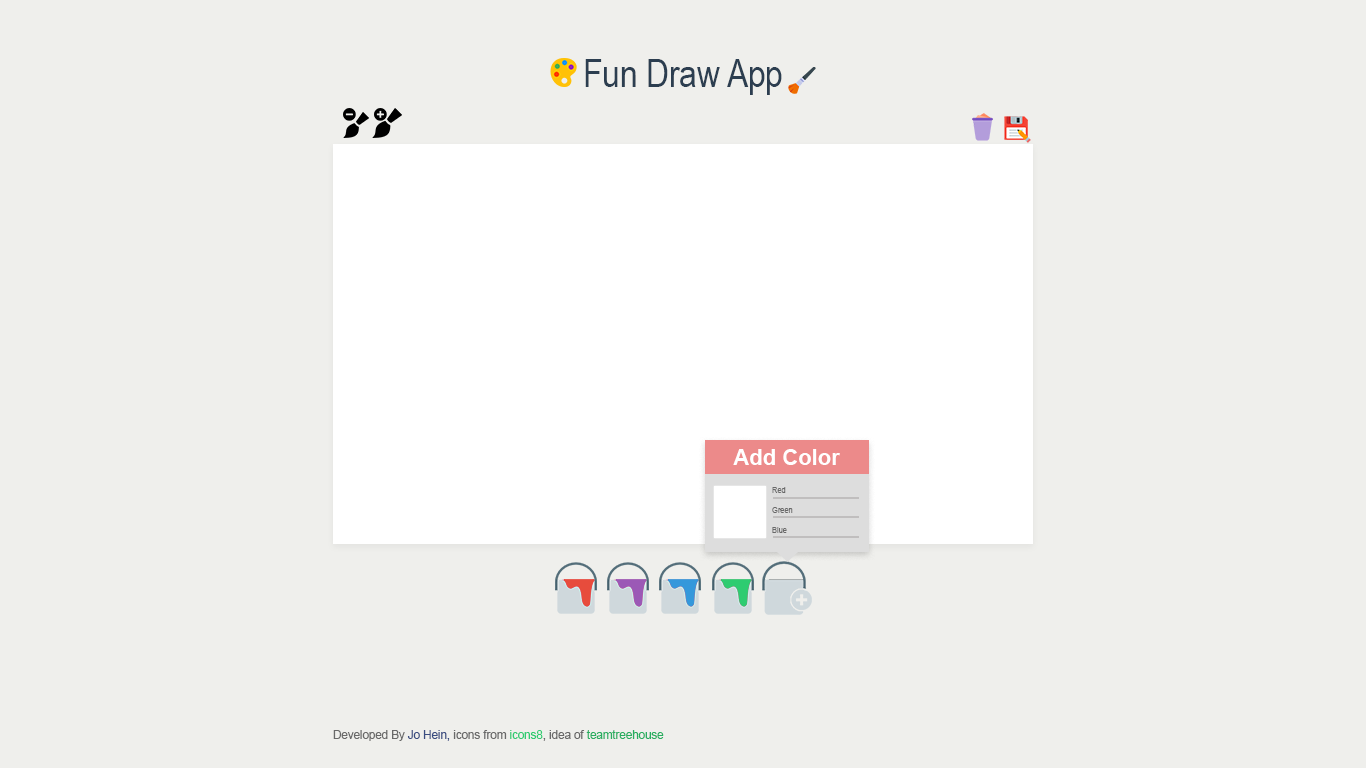
<style>
.page{position:relative;width:1366px;height:768px;background:#efefec}
.page>*{position:absolute;margin:0}
.t1{font:38.5px "ArialNarrow";color:#2c3e50}
.t2{font:21.9px "Arial-BoldMT";color:#ffffff}
.t3{font:9px "ArialNarrow";color:#696969}
.t4{font:11.5px "ArialMT";color:#27ae60}
.t5{font:11.5px "ArialMT";color:#696969}
.t6{font:11.5px "ArialMT";color:#394c81}
.t7{font:11.5px "ArialMT";color:#2ecc71}
</style>
<div class="page">
<p class="t1" style="left:585px;top:59px;width:197px;height:36px">Fun Draw App</p>
<p class="t2" style="left:733px;top:449px;width:107px;height:16px">Add Color</p>
<p class="t3" style="left:772px;top:487px;width:14px;height:6px">Red</p>
<p class="t3" style="left:772px;top:507px;width:21px;height:6px">Green</p>
<p class="t3" style="left:772px;top:527px;width:15px;height:6px">Blue</p>
<p class="t4" style="left:333px;top:730px;width:331px;height:11px"><span class="t5">Developed By </span><span class="t6">Jo Hein,</span><span class="t5"> icons from </span><span class="t7">icons8</span><span class="t5">, idea of </span>teamtreehouse</p>
</div>
